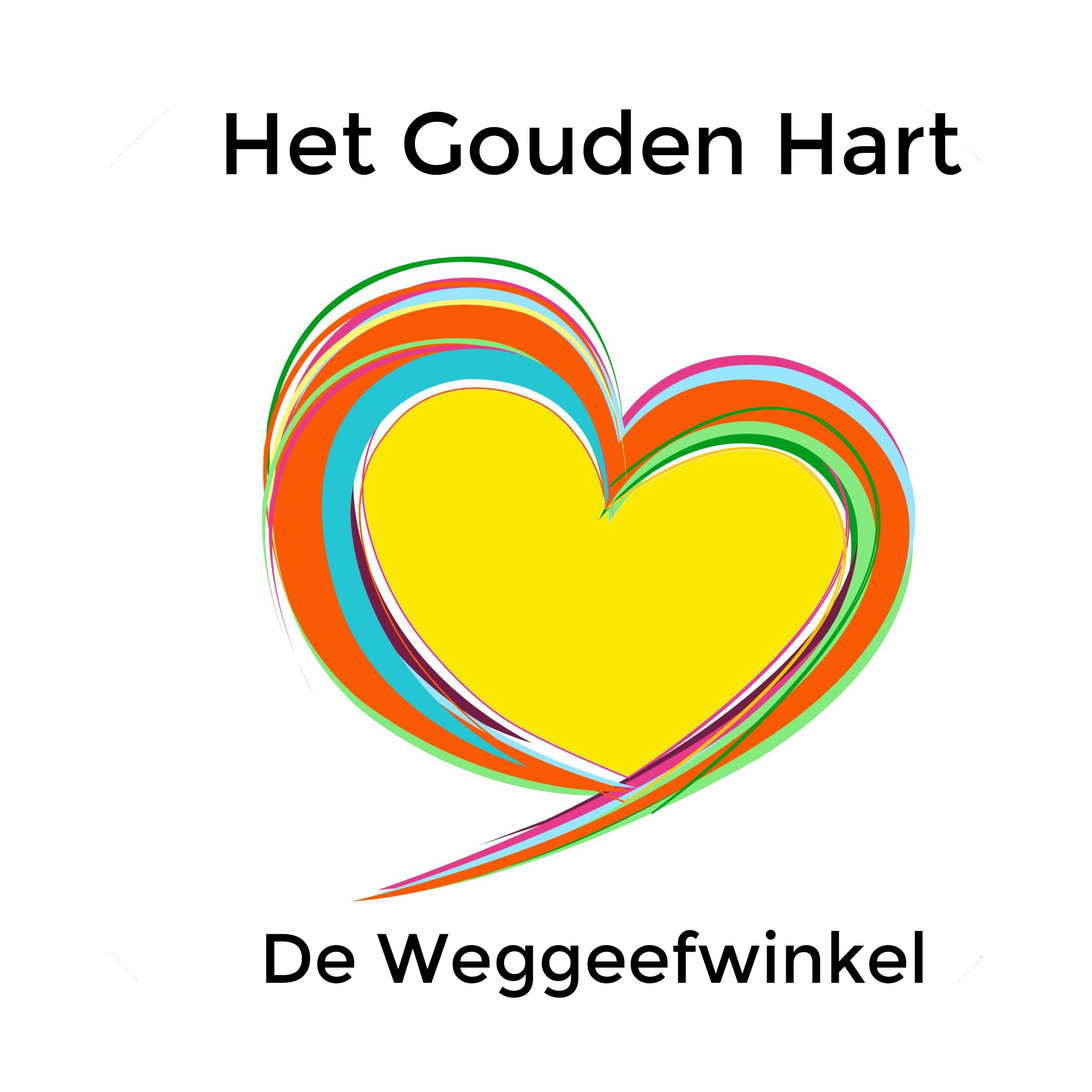
<style>
.page{position:relative;width:1092px;height:1092px;background:#ffffff}
.page>*{position:absolute;margin:0}
.t1{font:87.4px "Montserrat-Regular";color:#000000}
.t2{font:69.9px "Montserrat-Regular";color:#000000}
</style>
<div class="page">
<p class="t1" style="left:226px;top:109px;width:736px;height:66px">Het Gouden Hart</p>
<p class="t2" style="left:266px;top:929px;width:657px;height:69px">De Weggeefwinkel</p>
</div>
